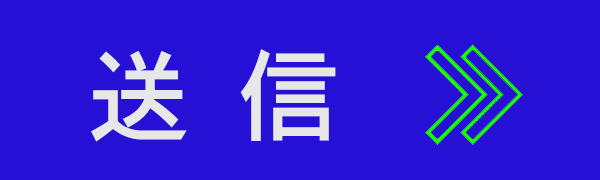
<style>
.page{position:relative;width:600px;height:180px;background:#2710d5}
.page>*{position:absolute;margin:0}
.t1{font:100px "EPSON-FUTO-KAKUGO";color:#e7e7e7}
</style>
<div class="page">
<p class="t1" style="left:91px;top:49px;width:245px;height:93px">送 信</p>
</div>
